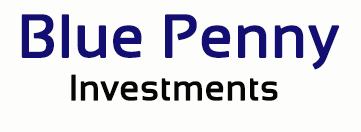
<style>
.page{position:relative;width:361px;height:132px;background:#fdfdfc}
.page>*{position:absolute;margin:0}
.t1{font:36px "Sansation-Regular";color:#060606;font-weight:bold}
.t2{font:60px "ArialMT";color:#569b9a;font-weight:bold}
.t3{font:60px "Sansation-Regular";color:#130e72;font-weight:bold}
</style>
<div class="page">
<p class="t1" style="left:21px;top:14px;width:319px;height:87px;text-align:center"><span class="t2">             </span><span class="t3">Blue Penny <br>                   </span>Investments</p>
</div>
